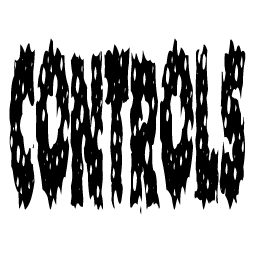
<style>
.page{position:relative;width:256px;height:256px;background:#ffffff}
.page>*{position:absolute;margin:0}
.t1{font:226px "Waterhle";color:#000000;scale:0.2 1}
</style>
<div class="page">
<p class="t1" style="left:9px;top:38px;width:237px;height:176px">CONTROLS</p>
</div>
